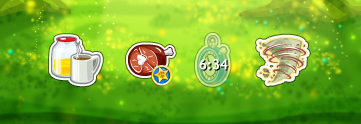
<style>
.page{position:relative;width:361px;height:124px}
.page>*{position:absolute;margin:0}
.t1{font:14px "TrebuchetMS";color:#ffffff;font-weight:bold}
</style>
<div class="page">
<p class="t1" style="left:199px;top:59px;width:29px;height:11px">6:34</p>
</div>
